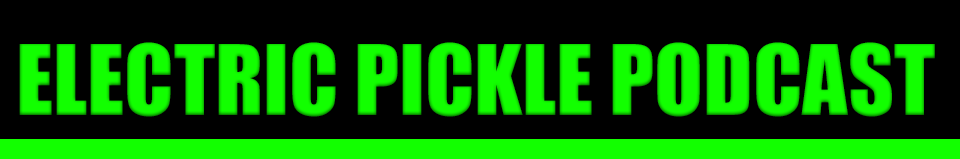
<style>
.page{position:relative;width:960px;height:159px;background:#000000}
.page>*{position:absolute;margin:0}
.t1{font:89.7px "Impact";color:#12ff00}
</style>
<div class="page">
<p class="t1" style="left:19px;top:42px;width:916px;height:75px">ELECTRIC PICKLE PODCAST</p>
</div>
